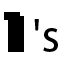
<style>
.page{position:relative;width:64px;height:64px;background:#ffffff}
.page>*{position:absolute;margin:0}
.t1{font:48px "MyriadPro-Regular";color:#000000}
.t2{font:48px "8BITWONDERNominal";color:#000000}
</style>
<div class="page">
<p class="t1" style="left:4px;top:12px;width:54px;height:40px"><span class="t2">1</span>'s</p>
</div>
